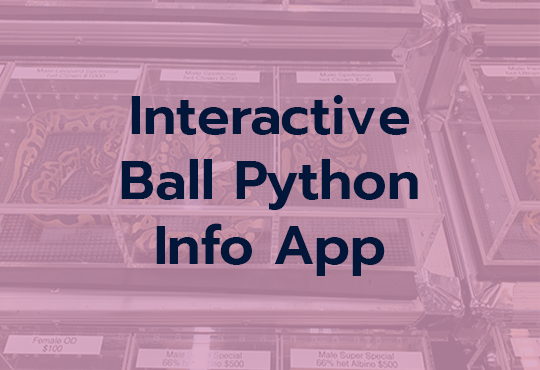
<style>
.page{position:relative;width:540px;height:370px}
.page>*{position:absolute;margin:0}
.t1{font:54.2px "Prompt-SemiBold";color:#011638}
</style>
<div class="page">
<p class="t1" style="left:121px;top:95px;width:297px;height:181px;text-align:center">Interactive<br>Ball Python<br>Info App</p>
</div>
